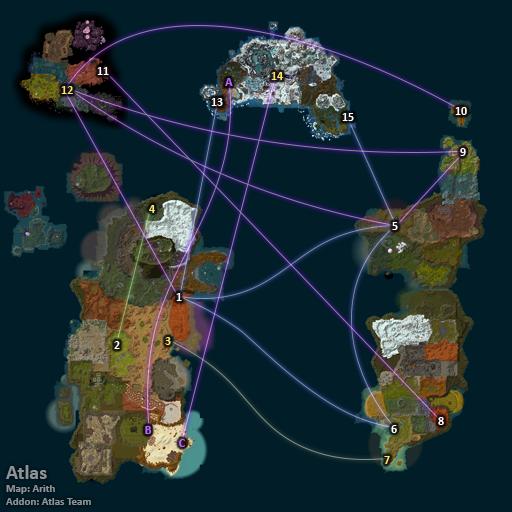
<style>
.page{position:relative;width:512px;height:512px;background:#001d28}
.page>*{position:absolute;margin:0}
.t1{font:12px "Calibri-Bold";color:#ffffff}
.t2{font:12px "Calibri-Bold";color:#bb66ff}
.t3{font:12px "Calibri-Bold";color:#fee570}
.t4{font:11px "Calibri-Bold";color:#8d9396}
.t5{font:20px "Calibri-Bold";color:#8d9396}
</style>
<div class="page">
<p class="t1" style="left:97px;top:67px;width:12px;height:8px">11</p>
<p class="t2" style="left:225px;top:78px;width:8px;height:8px">A</p>
<p class="t3" style="left:271px;top:72px;width:12px;height:8px">14</p>
<p class="t3" style="left:61px;top:86px;width:12px;height:8px">12</p>
<p class="t1" style="left:211px;top:98px;width:12px;height:8px">13</p>
<p class="t1" style="left:342px;top:113px;width:12px;height:8px">15</p>
<p class="t1" style="left:455px;top:107px;width:12px;height:8px">10</p>
<p class="t1" style="left:460px;top:148px;width:6px;height:8px">9</p>
<p class="t3" style="left:149px;top:205px;width:6px;height:8px">4</p>
<p class="t1" style="left:392px;top:222px;width:6px;height:8px">5</p>
<p class="t1" style="left:176px;top:293px;width:6px;height:8px">1</p>
<p class="t1" style="left:114px;top:341px;width:6px;height:8px">2</p>
<p class="t3" style="left:165px;top:337px;width:6px;height:8px">3</p>
<p class="t1" style="left:391px;top:425px;width:6px;height:8px">6</p>
<p class="t1" style="left:438px;top:417px;width:6px;height:8px">8</p>
<p class="t2" style="left:145px;top:426px;width:7px;height:8px">B</p>
<p class="t2" style="left:179px;top:439px;width:6px;height:8px">C</p>
<p class="t3" style="left:384px;top:456px;width:6px;height:8px">7</p>
<p class="t4" style="left:6px;top:465px;width:85px;height:40px"><span class="t5">Atlas<br></span>Map: Arith<br>Addon: Atlas Team</p>
</div>
